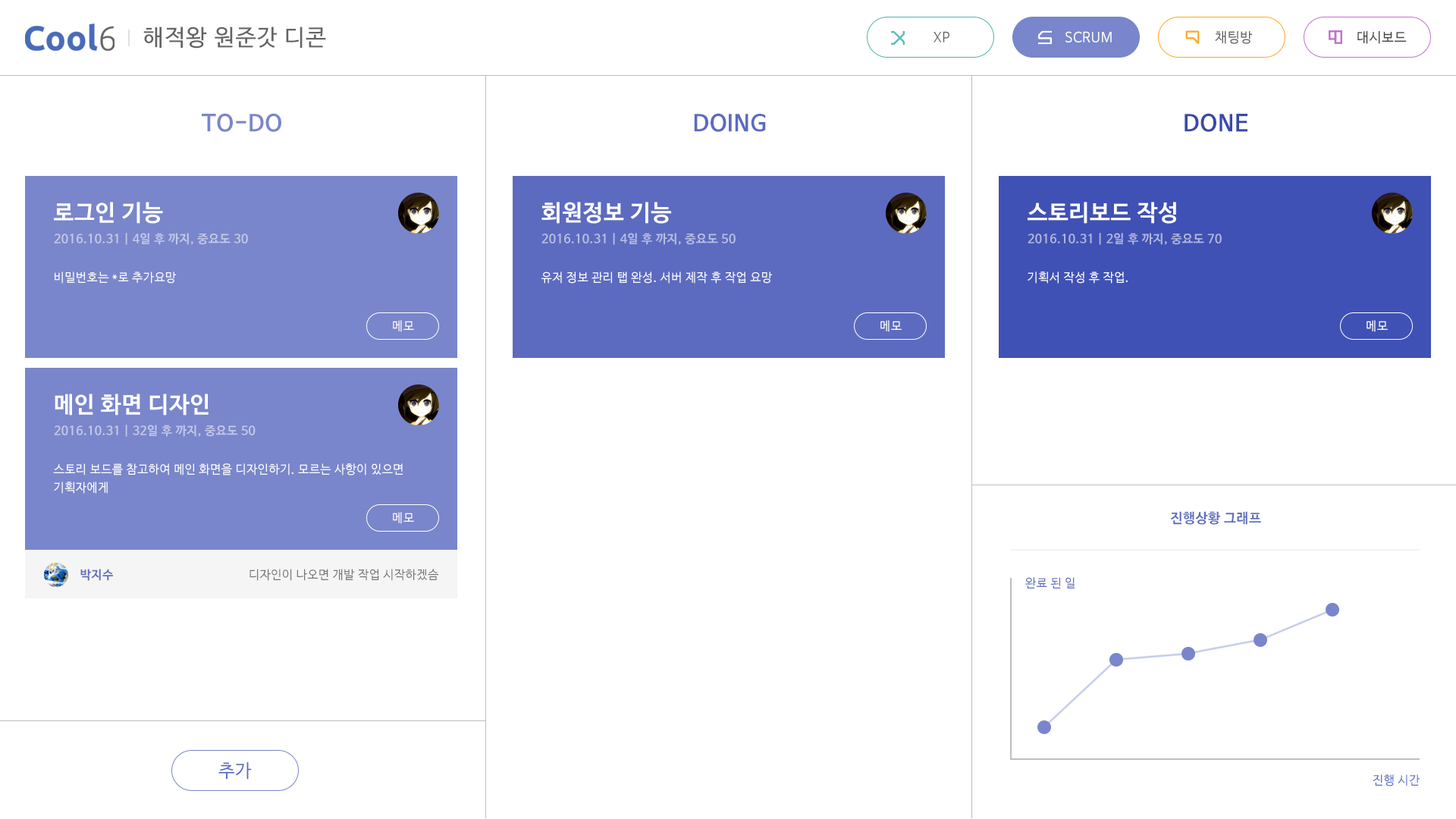
<style>
.page{position:relative;width:1456px;height:819px;background:#ffffff}
.page>*{position:absolute;margin:0}
.t1{font:22.7px "NanumBarunGothic";letter-spacing:0.05em;color:#646464}
.t2{font:13.6px "NanumBarunGothic";letter-spacing:0.025em;color:#646464}
.t3{font:13.6px "NanumBarunGothic";letter-spacing:0.025em;color:#ffffff}
.t4{font:13.6px "NanumBarunGothic";letter-spacing:0.025em;color:#424242}
.t5{font:22.7px "NanumBarunGothicBold";letter-spacing:0.025em;color:#7986cb}
.t6{font:22.7px "NanumBarunGothicBold";letter-spacing:0.025em;color:#5c6bc0}
.t7{font:22.7px "NanumBarunGothicBold";letter-spacing:0.025em;color:#3949ab}
.t8{font:22.7px "NanumBarunGothicBold";letter-spacing:0.025em;color:#ffffff}
.t9{font:12.1px "NanumBarunGothicBold";letter-spacing:0.025em;color:#c3c8e6}
.t10{font:12.1px "NanumBarunGothicBold";letter-spacing:0.025em;color:#b9bee1}
.t11{font:12.1px "NanumBarunGothicBold";letter-spacing:0.025em;color:#b0b6dc}
.t12{font:12.1px "NanumBarunGothic";letter-spacing:0.025em;color:#ffffff}
.t13{font:12.1px/18.2px "NanumBarunGothic";letter-spacing:0.025em;color:#ffffff}
.t14{font:13.6px "NanumBarunGothicBold";letter-spacing:0.025em;color:#5c6bc0}
.t15{font:12.1px "NanumBarunGothicBold";letter-spacing:0.025em;color:#5c6bc0}
.t16{font:12.1px "NanumBarunGothic";letter-spacing:0.025em;color:#757575}
.t17{font:12.1px "NanumBarunGothic";letter-spacing:0.025em;color:#5c6bc0}
.t18{font:18.2px "NanumBarunGothic";letter-spacing:0.025em;color:#5c6bc0}
</style>
<div class="page">
<p class="t1" style="left:143px;top:27px;width:183px;height:22px">해적왕 원준갓 디콘</p>
<p class="t2" style="left:933px;top:31px;width:16px;height:11px">XP</p>
<p class="t3" style="left:1065px;top:31px;width:47px;height:11px">SCRUM</p>
<p class="t2" style="left:1215px;top:31px;width:37px;height:13px">채팅방</p>
<p class="t4" style="left:1357px;top:31px;width:50px;height:13px">대시보드</p>
<p class="t5" style="left:202px;top:113px;width:79px;height:19px">TO-DO</p>
<p class="t6" style="left:694px;top:113px;width:72px;height:19px">DOING</p>
<p class="t7" style="left:1185px;top:113px;width:62px;height:19px">DONE</p>
<p class="t8" style="left:54px;top:202px;width:109px;height:22px">로그인 기능</p>
<p class="t8" style="left:541px;top:202px;width:130px;height:22px">회원정보 기능</p>
<p class="t8" style="left:1028px;top:202px;width:148px;height:22px">스토리보드 작성</p>
<p class="t9" style="left:54px;top:233px;width:194px;height:12px">2016.10.31 | 4일 후 까지, 중요도 30</p>
<p class="t10" style="left:541px;top:233px;width:195px;height:12px">2016.10.31 | 4일 후 까지, 중요도 50</p>
<p class="t11" style="left:1028px;top:233px;width:194px;height:12px">2016.10.31 | 2일 후 까지, 중요도 70</p>
<p class="t12" style="left:55px;top:271px;width:121px;height:13px">비밀번호는 *로 추가요망</p>
<p class="t12" style="left:541px;top:271px;width:231px;height:13px">유저 정보 관리 탭 완성. 서버 제작 후 작업 요망</p>
<p class="t12" style="left:1028px;top:271px;width:100px;height:13px">기획서 작성 후 작업.</p>
<p class="t12" style="left:393px;top:320px;width:21px;height:12px">메모</p>
<p class="t12" style="left:880px;top:320px;width:22px;height:12px">메모</p>
<p class="t12" style="left:1366px;top:320px;width:22px;height:12px">메모</p>
<p class="t8" style="left:55px;top:394px;width:154px;height:22px">메인 화면 디자인</p>
<p class="t9" style="left:54px;top:425px;width:202px;height:12px">2016.10.31 | 32일 후 까지, 중요도 50</p>
<p class="t13" style="left:53px;top:463px;width:350px;height:31px">스토리 보드를 참고하여 메인 화면을 디자인하기. 모르는 사항이 있으면<br>기획자에게</p>
<p class="t12" style="left:393px;top:512px;width:21px;height:12px">메모</p>
<p class="t14" style="left:1170px;top:511px;width:91px;height:14px">진행상황 그래프</p>
<p class="t15" style="left:80px;top:569px;width:33px;height:12px">박지수</p>
<p class="t16" style="left:249px;top:569px;width:189px;height:12px">디자인이 나오면 개발 작업 시작하겠슴</p>
<p class="t17" style="left:1025px;top:577px;width:50px;height:11px">완료 된 일</p>
<p class="t18" style="left:218px;top:762px;width:34px;height:18px">추가</p>
<p class="t17" style="left:1373px;top:774px;width:47px;height:12px">진행 시간</p>
</div>
